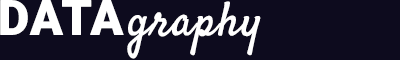
<style>
.page{position:relative;width:400px;height:60px;background:#0d0b1e}
.page>*{position:absolute;margin:0}
.t1{font:48px "Satisfy";letter-spacing:0.005em;color:#ffffff;font-weight:bold}
.t2{font:48px "Roboto-Black";letter-spacing:0.005em;color:#ffffff;font-weight:bold}
</style>
<div class="page">
<p class="t1" style="left:0px;top:0px;width:261px;height:59px"><span class="t2">DATA </span>graphy</p>
</div>
